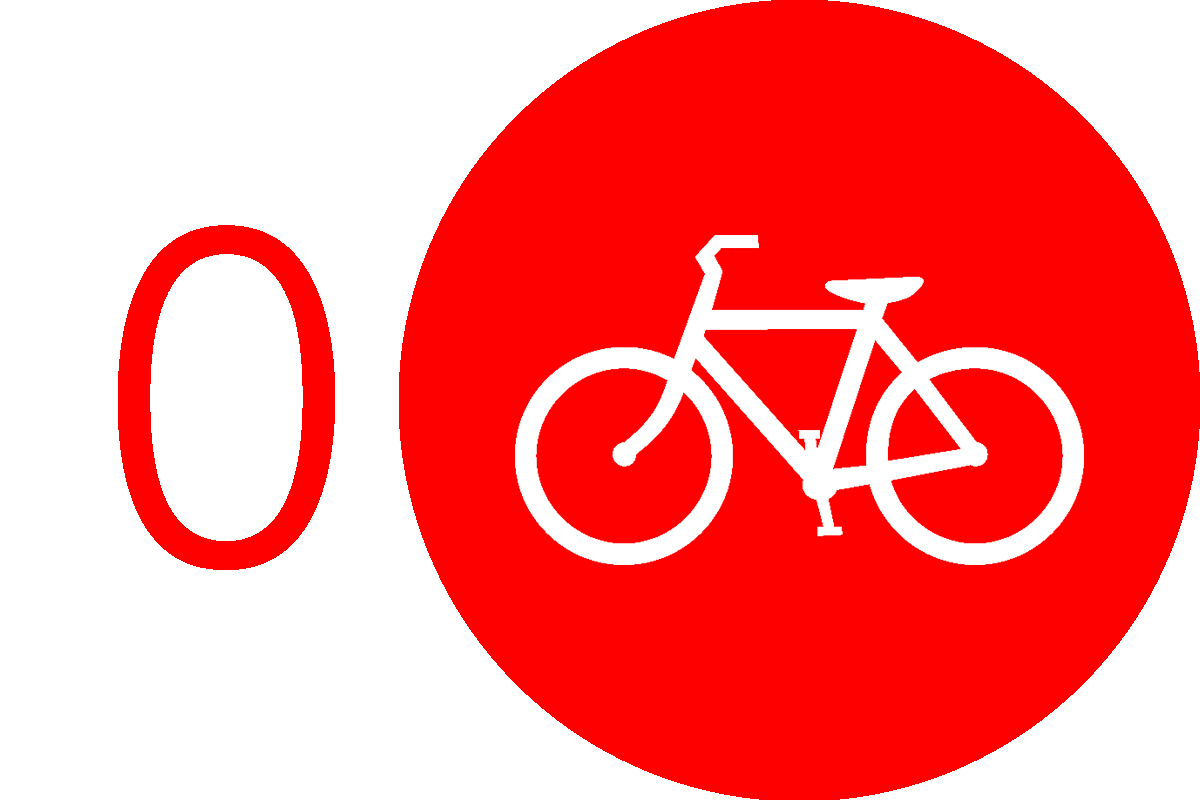
<style>
.page{position:relative;width:1200px;height:800px;background:#ff0000}
.page>*{position:absolute;margin:0}
.t1{font:500px "FrutigerNextPro-Light";color:#ff0000}
</style>
<div class="page">
<p class="t1" style="left:118px;top:225px;width:217px;height:345px">0</p>
</div>
